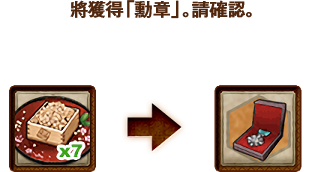
<style>
.page{position:relative;width:321px;height:172px;background:#ffffff}
.page>*{position:absolute;margin:0}
.t1{font:18px "GothicMB101Pr6N-Medium";letter-spacing:-0.04em;color:#50260d;font-weight:bold}
</style>
<div class="page">
<p class="t1" style="left:70px;top:0px;width:182px;height:19px">將獲得「勳章」。請確認。</p>
</div>
